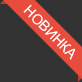
<style>
.page{position:relative;width:82px;height:82px;background:#333333}
.page>*{position:absolute;margin:0}
.t1{font:14px "ArialMT";color:#ffffff}
</style>
<div class="page">
<p class="t1" style="left:23px;top:4px;width:53px;height:56px;rotate:45deg">НОВИНКА</p>
</div>
